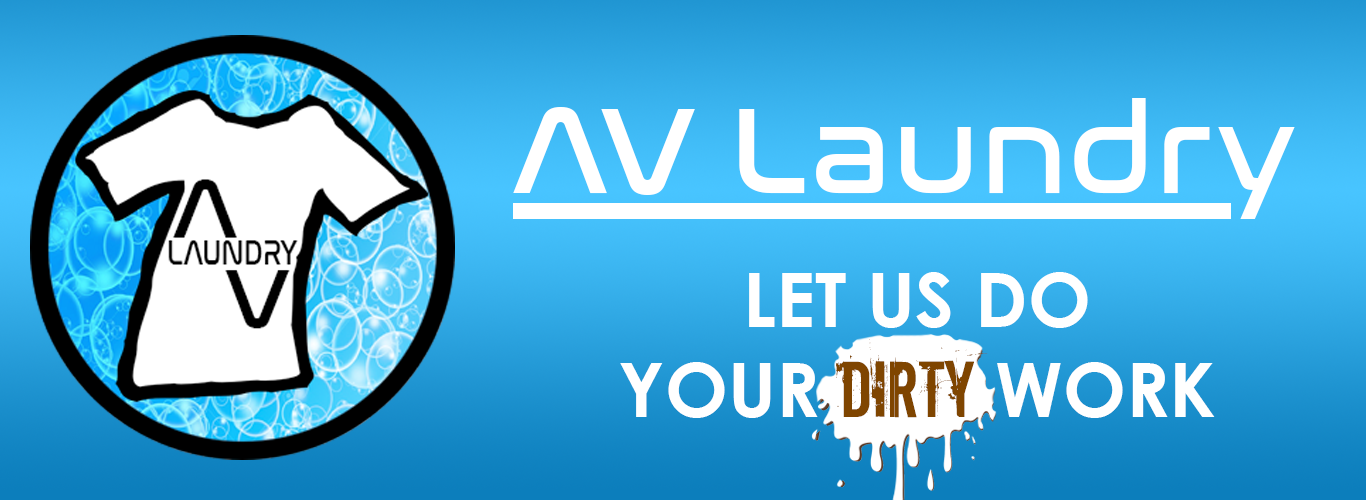
<style>
.page{position:relative;width:1366px;height:500px}
.page>*{position:absolute;margin:0}
.t1{font:125px "NasalizationRg-Regular";color:#ffffff}
.t2{font:75px "CenturyGothic-Bold";color:#ffffff}
.t3{font:75px "Downcome";color:#7f4500}
</style>
<div class="page">
<p class="t1" style="left:513px;top:98px;width:782px;height:121px">AV Laundry</p>
<p class="t2" style="left:620px;top:272px;width:595px;height:146px;text-align:center">LET US DO<br>YOUR <span class="t3">DIRTY</span> WORK</p>
</div>
